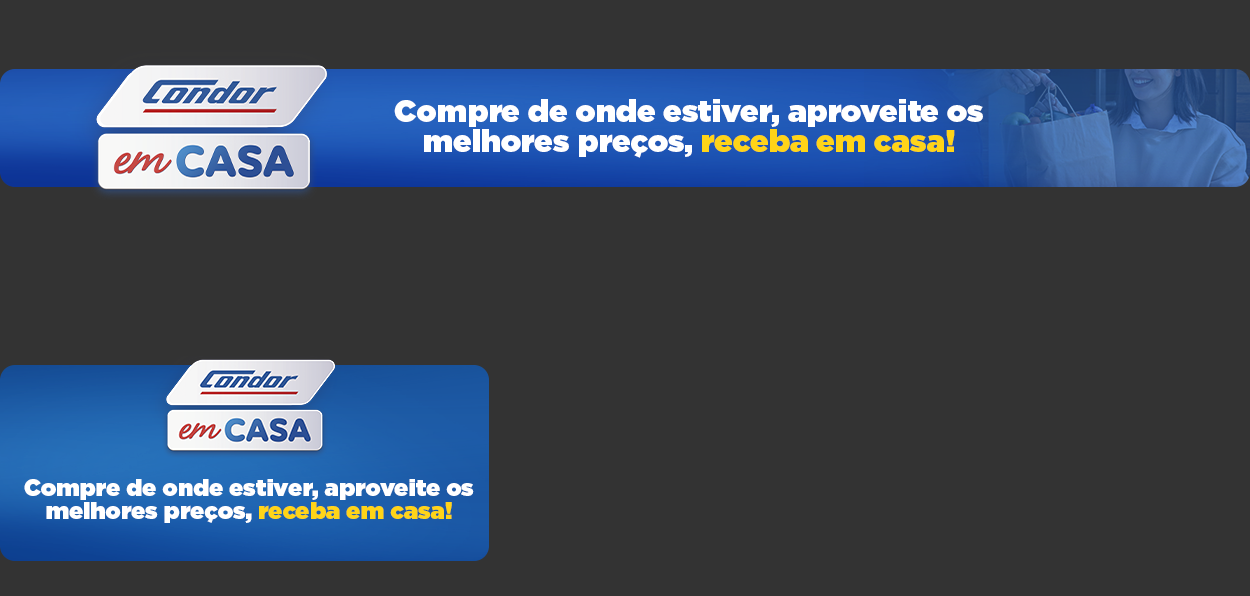
<style>
.page{position:relative;width:1250px;height:596px;background:#333333}
.page>*{position:absolute;margin:0}
.t1{font:30.9px/30.1px "GothamUltra";color:#ffffff}
.t2{font:30.9px/30.1px "GothamUltra";color:#ffd418}
.t3{font:23.6px/23px "GothamUltra";color:#ffffff}
.t4{font:23.6px/23px "GothamUltra";color:#ffd418}
</style>
<div class="page">
<p class="t1" style="left:394px;top:99px;width:589px;height:59px;text-align:center">Compre de onde estiver, aproveite os<br>melhores preços, <span class="t2">receba em casa!</span></p>
<p class="t3" style="left:24px;top:479px;width:450px;height:44px;text-align:center">Compre de onde estiver, aproveite os<br>melhores preços, <span class="t4">receba em casa!</span></p>
</div>
